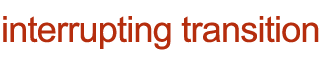
<style>
.page{position:relative;width:320px;height:60px;background:#ffffff}
.page>*{position:absolute;margin:0}
.t1{font:36px "ArialMT";letter-spacing:-0.021em;color:#b52d0d}
</style>
<div class="page">
<p class="t1" style="left:3px;top:16px;width:316px;height:34px">interrupting transition</p>
</div>
